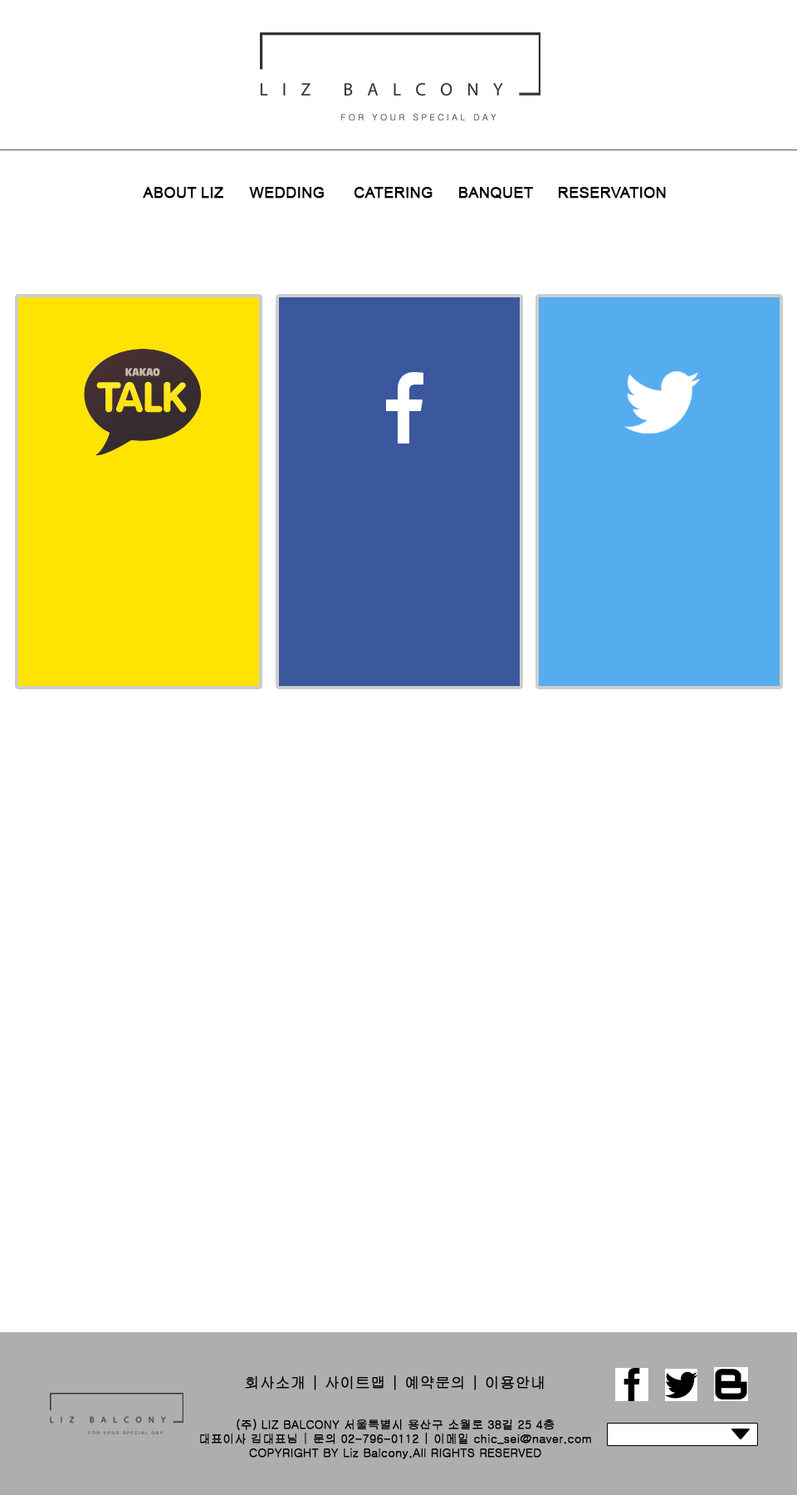
<style>
.page{position:relative;width:797px;height:1495px;background:#ffffff}
.page>*{position:absolute;margin:0}
.t1{font:15px "ArialMT";color:#000000;font-weight:bold}
.t2{font:15px "Gulim";color:#000000;font-weight:bold}
.t3{font:11.6px "Gulim";color:#000000;font-weight:bold}
</style>
<div class="page">
<p class="t1" style="left:143px;top:187px;width:80px;height:12px">ABOUT LIZ</p>
<p class="t1" style="left:249px;top:187px;width:75px;height:12px">WEDDING</p>
<p class="t1" style="left:354px;top:187px;width:79px;height:12px">CATERING</p>
<p class="t1" style="left:459px;top:187px;width:74px;height:12px">BANQUET</p>
<p class="t1" style="left:558px;top:187px;width:108px;height:12px">RESERVATION</p>
<p class="t2" style="left:245px;top:1376px;width:299px;height:15px">회사소개 | 사이트맵 | 예약문의 | 이용안내</p>
<p class="t3" style="left:200px;top:1419px;width:391px;height:41px;text-align:center">(주) LIZ BALCONY 서울특별시 용산구 소월로 38길 25 4층 <br>대표이사 김대표님 | 문의 02-796-0112 | 이메일 chic_sei@naver.com<br>COPYRIGHT BY Liz Balcony.All RIGHTS RESERVED</p>
</div>
